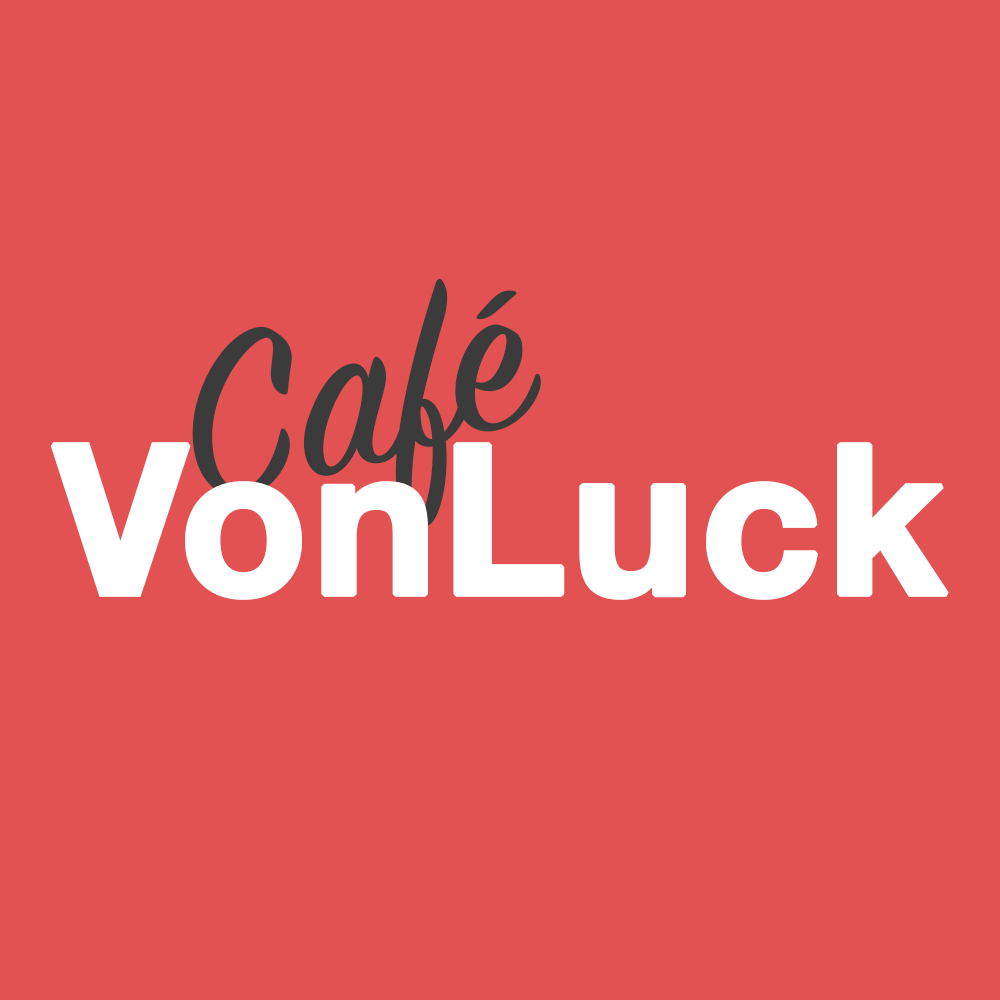
<style>
.page{position:relative;width:1000px;height:1000px;background:#e25252}
.page>*{position:absolute;margin:0}
.t1{font:250px "SignPainter-HouseScript";color:#3b3b3b}
.t2{font:208.3px "HelveticaNeue-Bold";color:#ffffff;font-weight:bold}
</style>
<div class="page">
<p class="t1" style="left:192px;top:278px;width:349px;height:249px;rotate:-15deg">Café</p>
<p class="t2" style="left:50px;top:442px;width:899px;height:158px">VonLuck</p>
</div>
